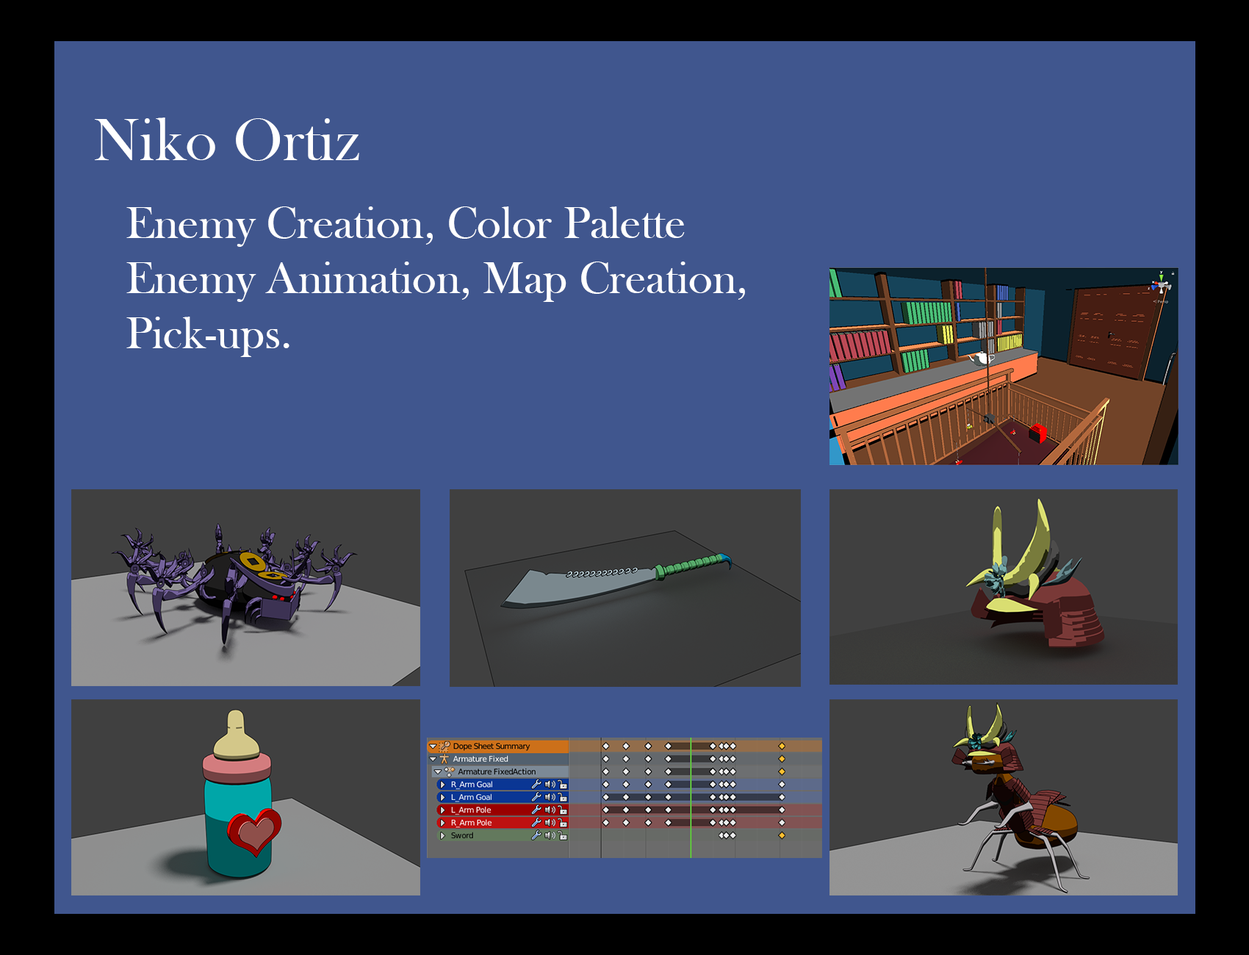
<style>
.page{position:relative;width:1249px;height:955px;background:#40568e}
.page>*{position:absolute;margin:0}
.t1{font:61.5px "BaskOldFace";color:#ffffff}
.t2{font:45.9px "BaskOldFace";color:#ffffff}
</style>
<div class="page">
<p class="t1" style="left:95px;top:118px;width:264px;height:43px">Niko Ortiz</p>
<p class="t2" style="left:126px;top:206px;width:619px;height:151px">Enemy Creation, Color Palette<br>Enemy Animation, Map Creation,<br>Pick-ups.</p>
</div>
